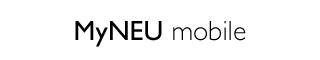
<style>
.page{position:relative;width:320px;height:60px;background:#ffffff}
.page>*{position:absolute;margin:0}
.t1{font:28px "GillSans-Light";color:#000000}
.t2{font:28px "GillSans";color:#000000}
</style>
<div class="page">
<p class="t1" style="left:75px;top:21px;width:171px;height:26px"><span class="t2">MyNEU </span>mobile</p>
</div>
